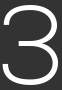
<style>
.page{position:relative;width:62px;height:90px;background:#333333}
.page>*{position:absolute;margin:0}
.t1{font:111.8px "NexaLight";color:#ffffff;scale:0.92 1}
</style>
<div class="page">
<p class="t1" style="left:2px;top:5px;width:56px;height:80px">3</p>
</div>
